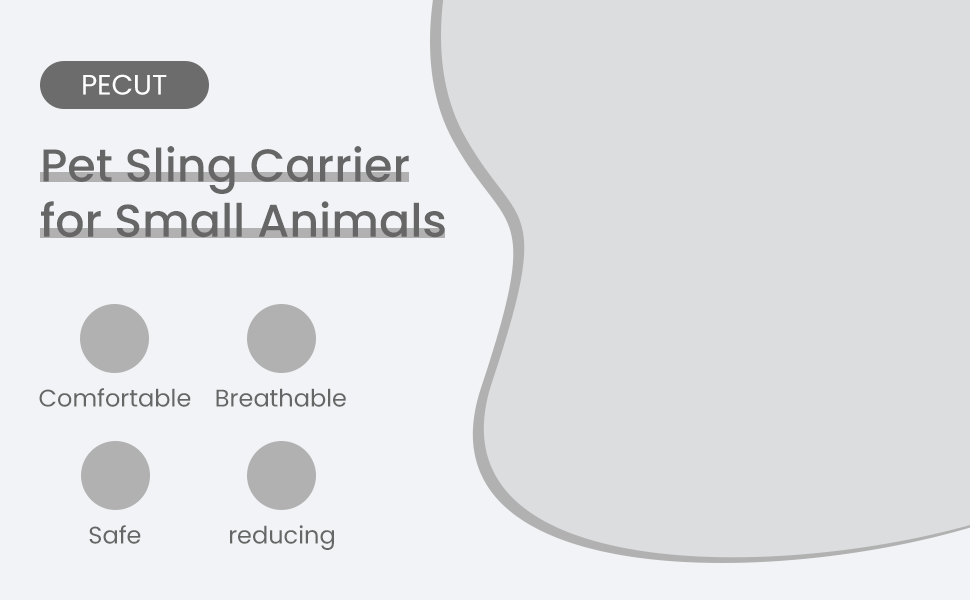
<style>
.page{position:relative;width:970px;height:600px;background:#f2f3f6}
.page>*{position:absolute;margin:0}
.t1{font:28px "Poppins-Regular";color:#ffffff}
.t2{font:46px "Poppins-Medium";color:#666666}
.t3{font:24px "Poppins-Regular";color:#666666}
</style>
<div class="page">
<p class="t1" style="left:83px;top:74px;width:84px;height:21px">PECUT</p>
<p class="t2" style="left:41px;top:146px;width:404px;height:92px">Pet Sling Carrier<br>for Small Animals</p>
<p class="t3" style="left:39px;top:388px;width:152px;height:19px">Comfortable</p>
<p class="t3" style="left:216px;top:388px;width:130px;height:19px">Breathable</p>
<p class="t3" style="left:89px;top:525px;width:52px;height:19px">Safe</p>
<p class="t3" style="left:230px;top:525px;width:104px;height:25px">reducing</p>
</div>
